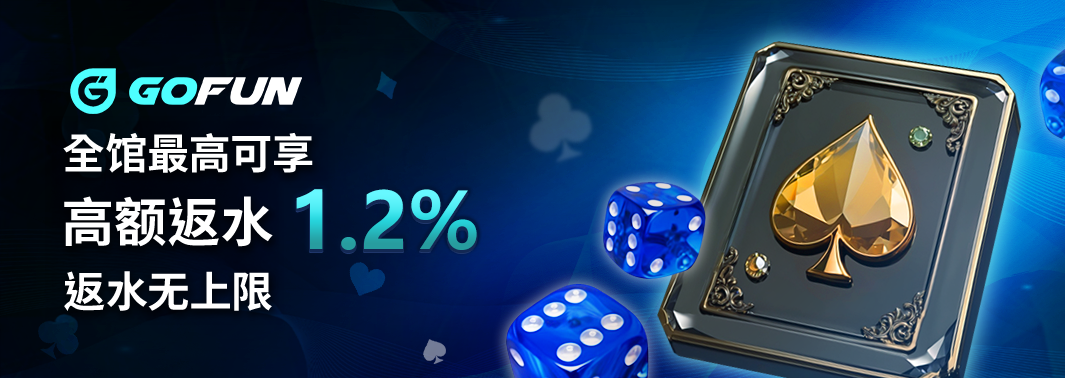
<style>
.page{position:relative;width:1065px;height:378px}
.page>*{position:absolute;margin:0}
.t1{font:42.3px "NotoSansCJKtc-Bold";letter-spacing:-0.01em;color:#ffffff}
.t2{font:52.9px "NotoSansCJKtc-Bold";letter-spacing:-0.01em;color:#ffffff}
</style>
<div class="page">
<p class="t1" style="left:63px;top:132px;width:250px;height:41px">全馆最高可享</p>
<p class="t2" style="left:64px;top:196px;width:209px;height:51px">高额返水</p>
<p class="t1" style="left:64px;top:271px;width:208px;height:40px">返水无上限</p>
</div>
